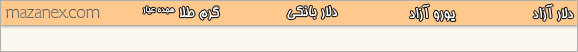
<style>
.page{position:relative;width:578px;height:52px;background:#fdf8ef}
.page>*{position:absolute;margin:0}
.t1{font:16px "Homa";color:#ffffff}
.t2{font:20px "TodaySHOP-XLight";color:#6f6d6a}
</style>
<div class="page">
<p class="t1" style="left:143px;top:6px;width:77px;height:14px">گرم طلا هجده عیار</p>
<p class="t1" style="left:287px;top:5px;width:51px;height:15px">دلار بانکی</p>
<p class="t1" style="left:410px;top:4px;width:46px;height:17px">یورو آزاد</p>
<p class="t1" style="left:533px;top:4px;width:41px;height:17px">دلار آزاد</p>
<p class="t2" style="left:6px;top:9px;width:94px;height:9px">mazanex.com</p>
</div>
